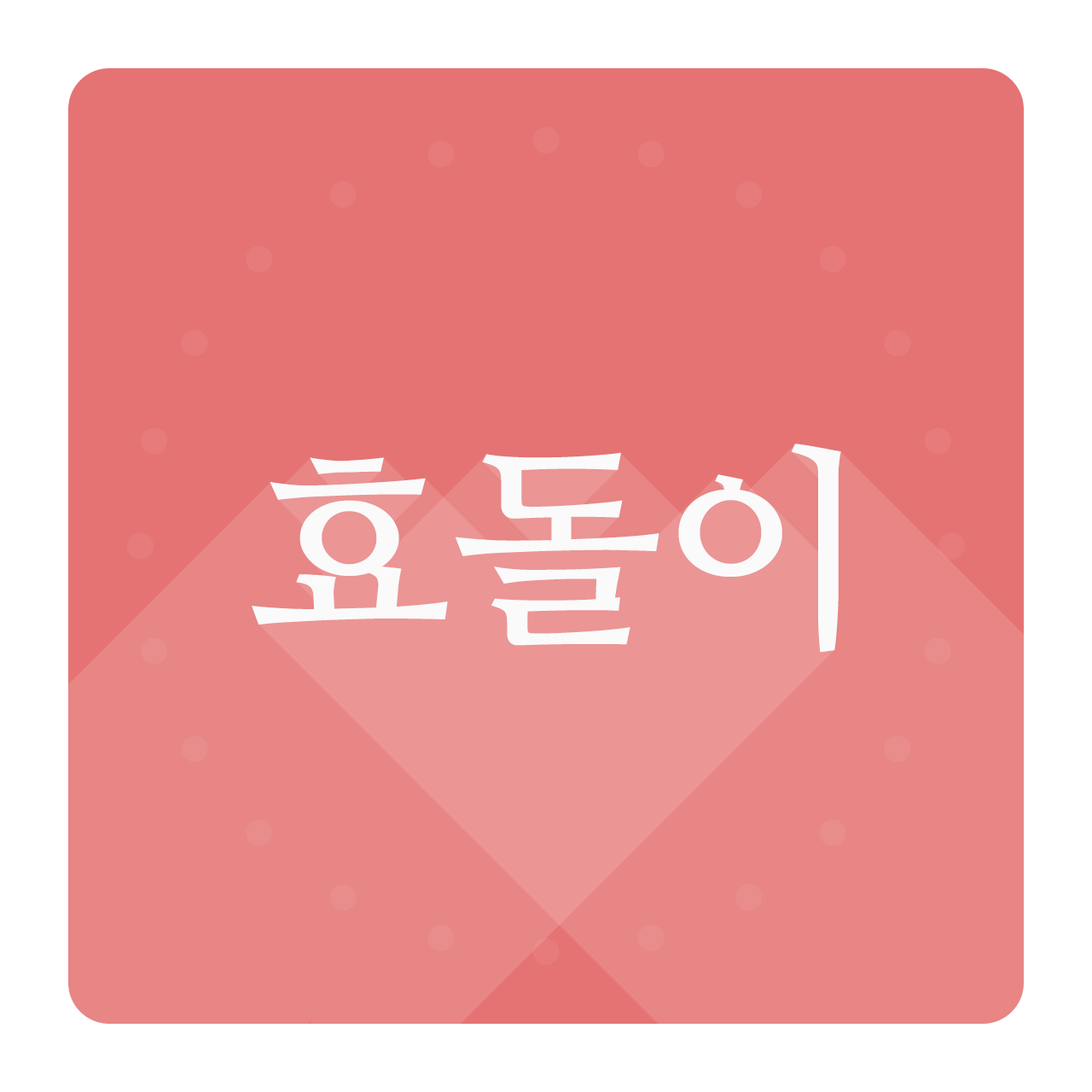
<style>
.page{position:relative;width:1092px;height:1092px;background:#e57373}
.page>*{position:absolute;margin:0}
.t1{font:218.4px "NanumMyeongjoBold";color:#fafafa}
</style>
<div class="page">
<p class="t1" style="left:252px;top:444px;width:589px;height:209px">효돌이</p>
</div>
